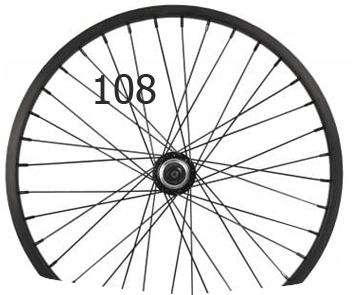
<style>
.page{position:relative;width:354px;height:295px;background:#ffffff}
.page>*{position:absolute;margin:0}
.t1{font:40px "Tahoma";color:#2c2c2c}
</style>
<div class="page">
<p class="t1" style="left:95px;top:74px;width:61px;height:30px">108</p>
</div>
